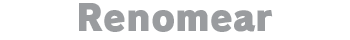
<style>
.page{position:relative;width:350px;height:40px;background:#ffffff}
.page>*{position:absolute;margin:0}
.t1{font:36px "RodinPro-UB";color:#9a9c9f}
</style>
<div class="page">
<p class="t1" style="left:79px;top:3px;width:194px;height:29px">Renomear</p>
</div>
